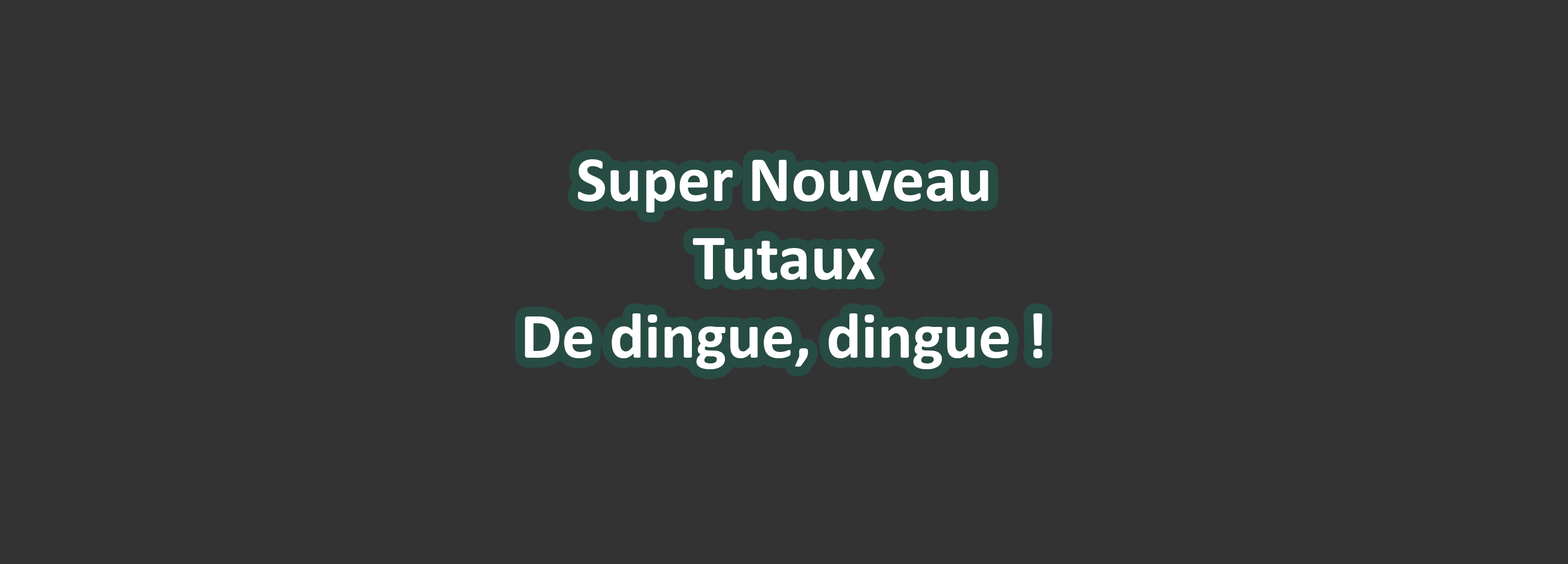
<style>
.page{position:relative;width:1568px;height:564px;background:#333333}
.page>*{position:absolute;margin:0}
.t1{font:65.3px "Calibri-Bold";color:#ffffff}
</style>
<div class="page">
<p class="t1" style="left:525px;top:159px;width:518px;height:211px;text-align:center">Super Nouveau<br>Tutaux<br>De dingue, dingue !</p>
</div>
